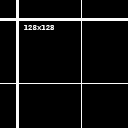
<style>
.page{position:relative;width:128px;height:128px;background:#000000}
.page>*{position:absolute;margin:0}
.t1{font:8px "Consolas";color:#fcfcfc}
</style>
<div class="page">
<p class="t1" style="left:24px;top:25px;width:30px;height:5px">128x128</p>
</div>
